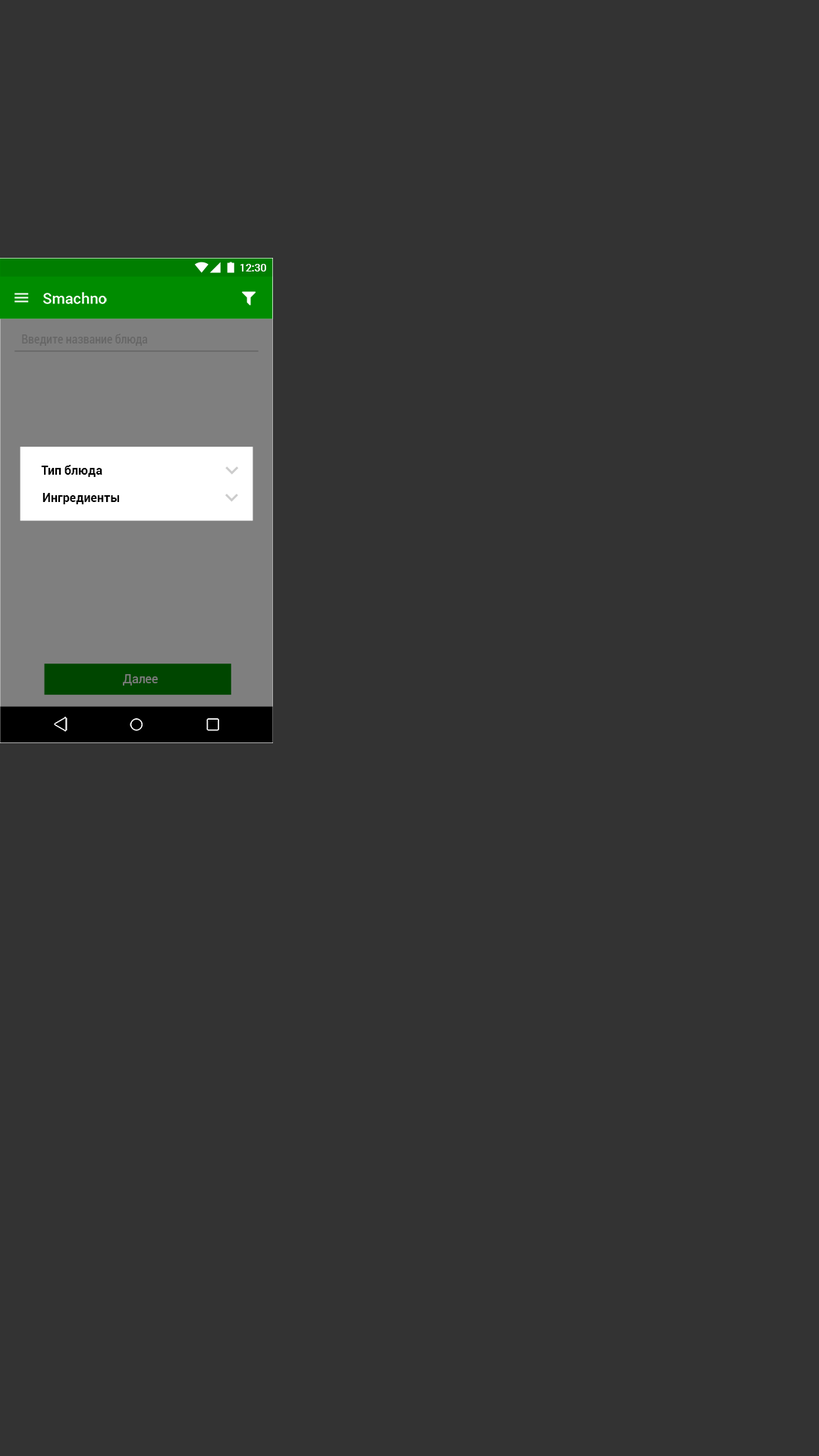
<style>
.page{position:relative;width:819px;height:1456px;background:#333333}
.page>*{position:absolute;margin:0}
.t1{font:10.6px "Roboto-Medium";color:#ffffff}
.t2{font:15.1px "Roboto-Medium";color:#ffffff}
.t3{font:12.1px "Roboto-Condensed";color:#666666}
.t4{font:12.1px "Roboto-Bold";color:#000000}
.t5{font:12.1px "Roboto-Regular";color:#7f7f7f}
</style>
<div class="page">
<p class="t1" style="left:240px;top:264px;width:26px;height:7px">12:30</p>
<p class="t2" style="left:43px;top:292px;width:64px;height:12px">Smachno</p>
<p class="t3" style="left:22px;top:334px;width:126px;height:12px">Введите название блюда</p>
<p class="t4" style="left:41px;top:465px;width:61px;height:12px">Тип блюда</p>
<p class="t4" style="left:42px;top:493px;width:77px;height:11px">Ингредиенты</p>
<p class="t5" style="left:123px;top:674px;width:35px;height:12px">Далее</p>
</div>
